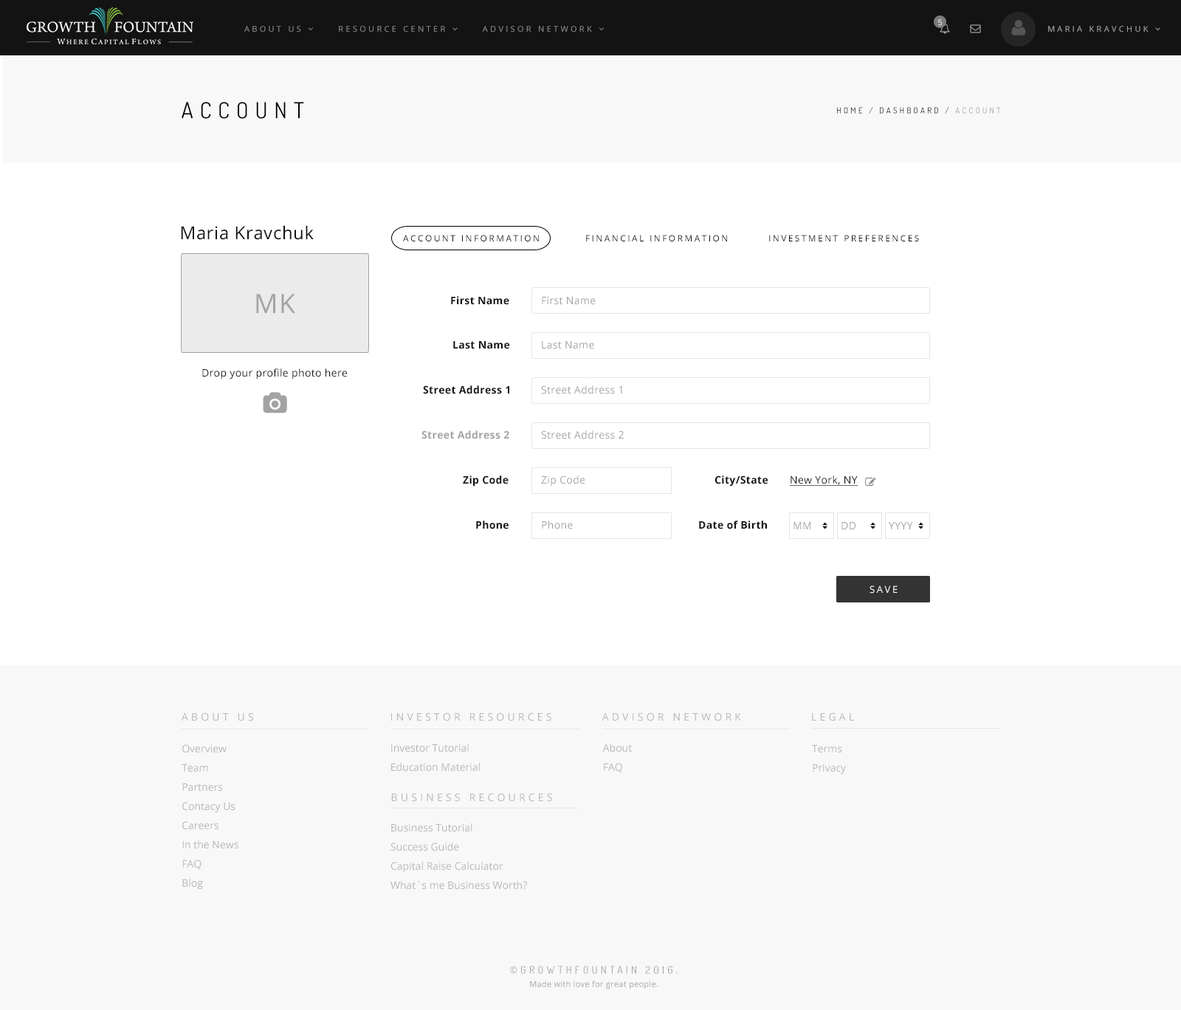
<style>
.page{position:relative;width:1181px;height:1010px;background:#ffffff}
.page>*{position:absolute;margin:0}
.t1{font:8.1px "OpenSans";letter-spacing:0.025em;color:#fdfbfb}
.t2{font:22.1px "Dosis-Regular";letter-spacing:0.3em;color:#000000;text-transform:uppercase}
.t3{font:8.1px "Dosis-Regular";letter-spacing:0.3em;text-transform:uppercase}
.t4{font:17.7px "OpenSans";letter-spacing:0.025em;color:#111111}
.t5{font:8.9px "OpenSans";letter-spacing:0.2em;color:#111111;text-transform:uppercase}
.t6{font:26.6px "OpenSans";letter-spacing:0.025em;color:#a3a3a3}
.t7{font:10.3px "OpenSans-Bold";letter-spacing:0.025em;color:#111111}
.t8{font:10.3px "OpenSans";letter-spacing:0.025em;color:#a3a3a3}
.t9{font:10.3px "OpenSans";letter-spacing:0.025em;color:#111111}
.t10{font:10.3px "OpenSans-Bold";letter-spacing:0.025em;color:#a3a3a3}
.t11{font:10.3px "OpenSans";letter-spacing:0.025em;color:#111111;text-decoration:underline}
.t12{font:10.3px "OpenSans";letter-spacing:0.025em;color:#a3a3a3;text-transform:uppercase}
.t13{font:9.6px "OpenSans";letter-spacing:0.2em;color:#ffffff;text-transform:uppercase}
.t14{font:10.3px "OpenSans";letter-spacing:0.3em;color:#b7b7b7;text-transform:uppercase}
.t15{font:10.3px/19.2px "OpenSans";color:#b7b7b7}
.t16{font:8.1px/13.3px "OpenSans";letter-spacing:0.025em;color:#a3a3a3}
.t17{font:10.3px/13.3px "Dosis-Regular";letter-spacing:0.3em;color:#a3a3a3;text-transform:uppercase}
</style>
<div class="page">
<p class="t1" style="left:938px;top:19px;width:4px;height:7px">5</p>
<p class="t2" style="left:182px;top:102px;width:122px;height:17px">Account</p>
<p class="t3" style="left:837px;top:107px;width:164px;height:7px">home / Dashboard / account</p>
<p class="t4" style="left:181px;top:225px;width:133px;height:15px">Maria Kravchuk</p>
<p class="t5" style="left:403px;top:235px;width:136px;height:6px">Account information</p>
<p class="t5" style="left:586px;top:235px;width:141px;height:6px">financial information</p>
<p class="t5" style="left:769px;top:235px;width:150px;height:6px">investment preferences</p>
<p class="t6" style="left:256px;top:294px;width:39px;height:19px">MK</p>
<p class="t7" style="left:451px;top:296px;width:58px;height:9px">First Name</p>
<p class="t8" style="left:542px;top:296px;width:54px;height:9px">First Name</p>
<p class="t7" style="left:453px;top:341px;width:57px;height:8px">Last Name</p>
<p class="t8" style="left:542px;top:341px;width:52px;height:8px">Last Name</p>
<p class="t9" style="left:202px;top:368px;width:145px;height:11px">Drop your profile photo here</p>
<p class="t7" style="left:423px;top:385px;width:86px;height:9px">Street Address 1</p>
<p class="t8" style="left:541px;top:385px;width:81px;height:9px">Street Address 1</p>
<p class="t10" style="left:421px;top:430px;width:88px;height:9px">Street Address 2</p>
<p class="t8" style="left:541px;top:430px;width:83px;height:9px">Street Address 2</p>
<p class="t7" style="left:463px;top:475px;width:46px;height:11px">Zip Code</p>
<p class="t8" style="left:541px;top:475px;width:44px;height:11px">Zip Code</p>
<p class="t7" style="left:714px;top:475px;width:54px;height:11px">City/State</p>
<p class="t11" style="left:790px;top:475px;width:68px;height:11px">New York, NY</p>
<p class="t7" style="left:476px;top:520px;width:33px;height:9px">Phone</p>
<p class="t8" style="left:542px;top:520px;width:31px;height:9px">Phone</p>
<p class="t7" style="left:699px;top:520px;width:68px;height:9px">Date of Birth</p>
<p class="t12" style="left:793px;top:522px;width:18px;height:7px">MM</p>
<p class="t12" style="left:841px;top:522px;width:15px;height:7px">DD</p>
<p class="t12" style="left:889px;top:522px;width:24px;height:7px">YYYY</p>
<p class="t13" style="left:869px;top:585px;width:29px;height:8px">save</p>
<p class="t14" style="left:182px;top:712px;width:71px;height:9px">about us</p>
<p class="t14" style="left:391px;top:712px;width:160px;height:9px">Investor resources</p>
<p class="t14" style="left:602px;top:712px;width:139px;height:9px">advisor network</p>
<p class="t14" style="left:812px;top:712px;width:42px;height:9px">legal</p>
<p class="t15" style="left:182px;top:744px;width:56px;height:145px">Overview<br>Team<br>Partners<br>Contacy Us<br>Careers<br>In the News<br>FAQ<br>Blog</p>
<p class="t15" style="left:391px;top:743px;width:89px;height:28px">Investor Tutorial<br>Education Material</p>
<p class="t15" style="left:602px;top:743px;width:30px;height:30px">About<br>FAQ</p>
<p class="t15" style="left:812px;top:745px;width:34px;height:29px">Terms<br>Privacy</p>
<p class="t14" style="left:391px;top:793px;width:161px;height:9px">business recources</p>
<p class="t15" style="left:390px;top:823px;width:137px;height:66px">Business Tutorial<br>Success Guide<br>Capital Raise Calculator<br>What`s me Business Worth?</p>
<p class="t16" style="left:510px;top:965px;width:168px;height:24px;text-align:center"><span class="t17">©GROWTHFOUNTAIN 2016.<br></span>Made with love for great people.</p>
</div>
